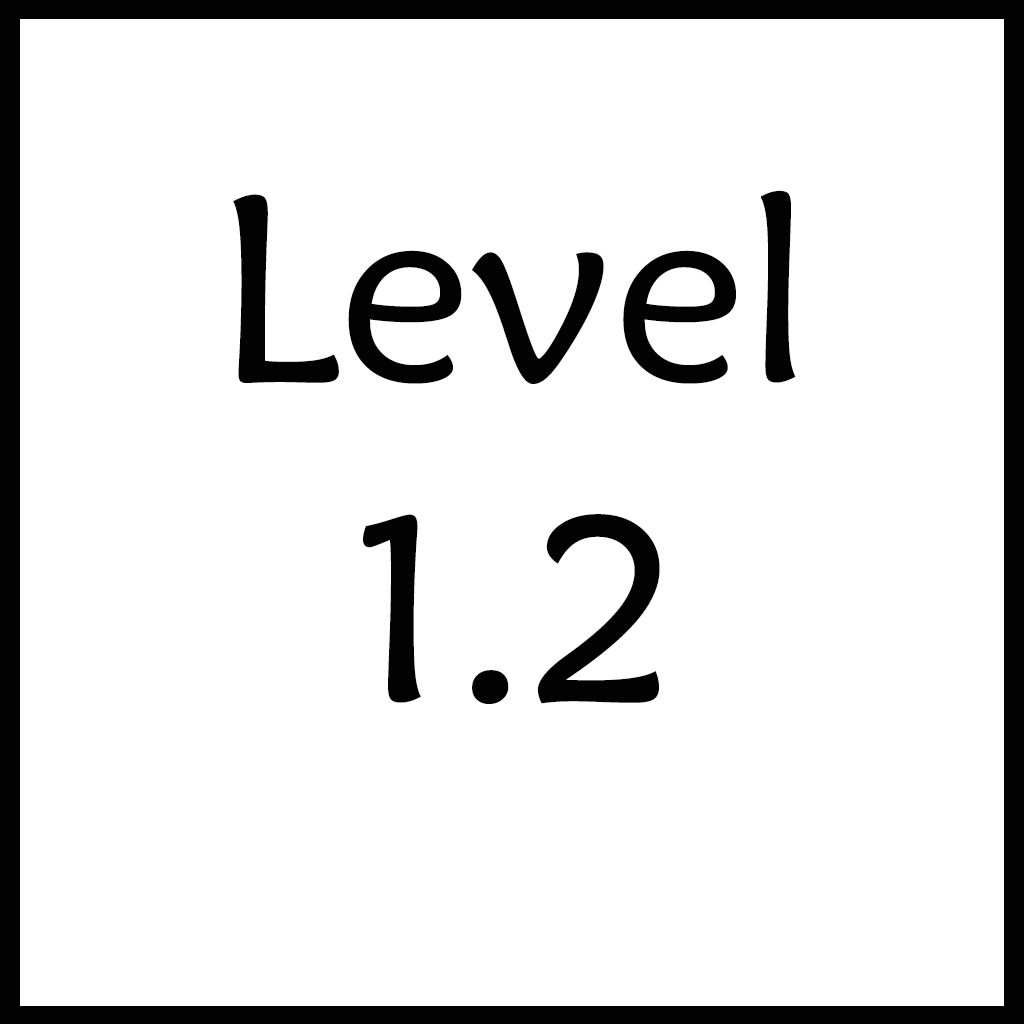
<style>
.page{position:relative;width:1024px;height:1024px;background:#ffffff}
.page>*{position:absolute;margin:0}
.t1{font:266.7px "MaiandraGD-Regular";color:#020202}
</style>
<div class="page">
<p class="t1" style="left:233px;top:190px;width:563px;height:514px;text-align:center">Level <br>1.2</p>
</div>
